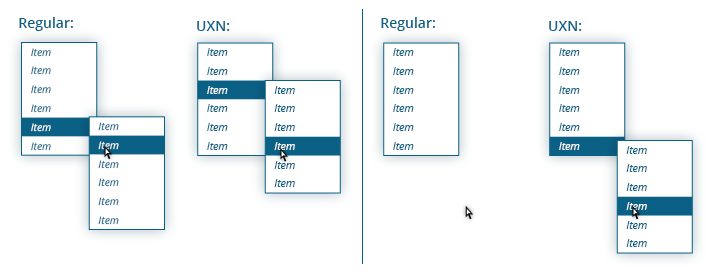
<style>
.page{position:relative;width:714px;height:275px;background:#ffffff}
.page>*{position:absolute;margin:0}
.t1{font:14px "OpenSans-Semibold";color:#0b6185}
.t2{font:10.5px "OpenSans-Italic"}
.t3{font:10.5px "OpenSans-Italic";color:#0b6185}
.t4{font:10.5px "OpenSans-Italic";color:#ffffff}
.t5{font:10.5px "OpenSans-Italic";color:#fefefe}
</style>
<div class="page">
<p class="t1" style="left:19px;top:17px;width:54px;height:14px">Regular:</p>
<p class="t1" style="left:381px;top:17px;width:54px;height:14px">Regular:</p>
<p class="t1" style="left:197px;top:21px;width:33px;height:10px">UXN:</p>
<p class="t1" style="left:549px;top:21px;width:33px;height:10px">UXN:</p>
<p class="t2" style="left:31px;top:48px;width:20px;height:9px">Item</p>
<p class="t3" style="left:207px;top:48px;width:21px;height:8px">Item</p>
<p class="t3" style="left:393px;top:48px;width:21px;height:8px">Item</p>
<p class="t3" style="left:559px;top:48px;width:21px;height:8px">Item</p>
<p class="t2" style="left:31px;top:66px;width:20px;height:9px">Item</p>
<p class="t3" style="left:207px;top:67px;width:21px;height:8px">Item</p>
<p class="t3" style="left:393px;top:67px;width:21px;height:8px">Item</p>
<p class="t3" style="left:559px;top:67px;width:21px;height:8px">Item</p>
<p class="t2" style="left:31px;top:85px;width:20px;height:9px">Item</p>
<p class="t4" style="left:207px;top:86px;width:21px;height:8px">Item</p>
<p class="t4" style="left:207px;top:86px;width:21px;height:8px">Item</p>
<p class="t3" style="left:274px;top:86px;width:21px;height:8px">Item</p>
<p class="t3" style="left:393px;top:86px;width:21px;height:8px">Item</p>
<p class="t3" style="left:559px;top:86px;width:21px;height:8px">Item</p>
<p class="t2" style="left:31px;top:104px;width:20px;height:9px">Item</p>
<p class="t3" style="left:207px;top:104px;width:21px;height:8px">Item</p>
<p class="t3" style="left:274px;top:104px;width:21px;height:8px">Item</p>
<p class="t3" style="left:393px;top:104px;width:21px;height:8px">Item</p>
<p class="t3" style="left:559px;top:104px;width:21px;height:8px">Item</p>
<p class="t2" style="left:31px;top:123px;width:20px;height:9px">Item</p>
<p class="t4" style="left:31px;top:123px;width:20px;height:9px">Item</p>
<p class="t2" style="left:98px;top:122px;width:21px;height:9px">Item</p>
<p class="t3" style="left:207px;top:123px;width:21px;height:8px">Item</p>
<p class="t3" style="left:274px;top:123px;width:21px;height:8px">Item</p>
<p class="t3" style="left:393px;top:123px;width:21px;height:8px">Item</p>
<p class="t3" style="left:559px;top:123px;width:21px;height:8px">Item</p>
<p class="t2" style="left:31px;top:142px;width:20px;height:9px">Item</p>
<p class="t2" style="left:98px;top:141px;width:21px;height:9px">Item</p>
<p class="t2" style="left:98px;top:141px;width:21px;height:9px">Item</p>
<p class="t3" style="left:207px;top:142px;width:21px;height:8px">Item</p>
<p class="t5" style="left:274px;top:142px;width:21px;height:8px">Item</p>
<p class="t4" style="left:274px;top:142px;width:21px;height:8px">Item</p>
<p class="t3" style="left:393px;top:142px;width:21px;height:8px">Item</p>
<p class="t4" style="left:559px;top:142px;width:21px;height:8px">Item</p>
<p class="t4" style="left:559px;top:142px;width:21px;height:8px">Item</p>
<p class="t3" style="left:626px;top:146px;width:21px;height:8px">Item</p>
<p class="t2" style="left:98px;top:160px;width:21px;height:9px">Item</p>
<p class="t3" style="left:274px;top:161px;width:21px;height:8px">Item</p>
<p class="t3" style="left:626px;top:164px;width:21px;height:8px">Item</p>
<p class="t2" style="left:98px;top:178px;width:21px;height:9px">Item</p>
<p class="t3" style="left:274px;top:179px;width:21px;height:8px">Item</p>
<p class="t3" style="left:626px;top:183px;width:21px;height:8px">Item</p>
<p class="t2" style="left:98px;top:197px;width:21px;height:9px">Item</p>
<p class="t2" style="left:626px;top:202px;width:21px;height:8px">Item</p>
<p class="t4" style="left:626px;top:202px;width:21px;height:8px">Item</p>
<p class="t2" style="left:98px;top:216px;width:21px;height:9px">Item</p>
<p class="t3" style="left:626px;top:221px;width:21px;height:8px">Item</p>
<p class="t3" style="left:626px;top:239px;width:21px;height:8px">Item</p>
</div>
